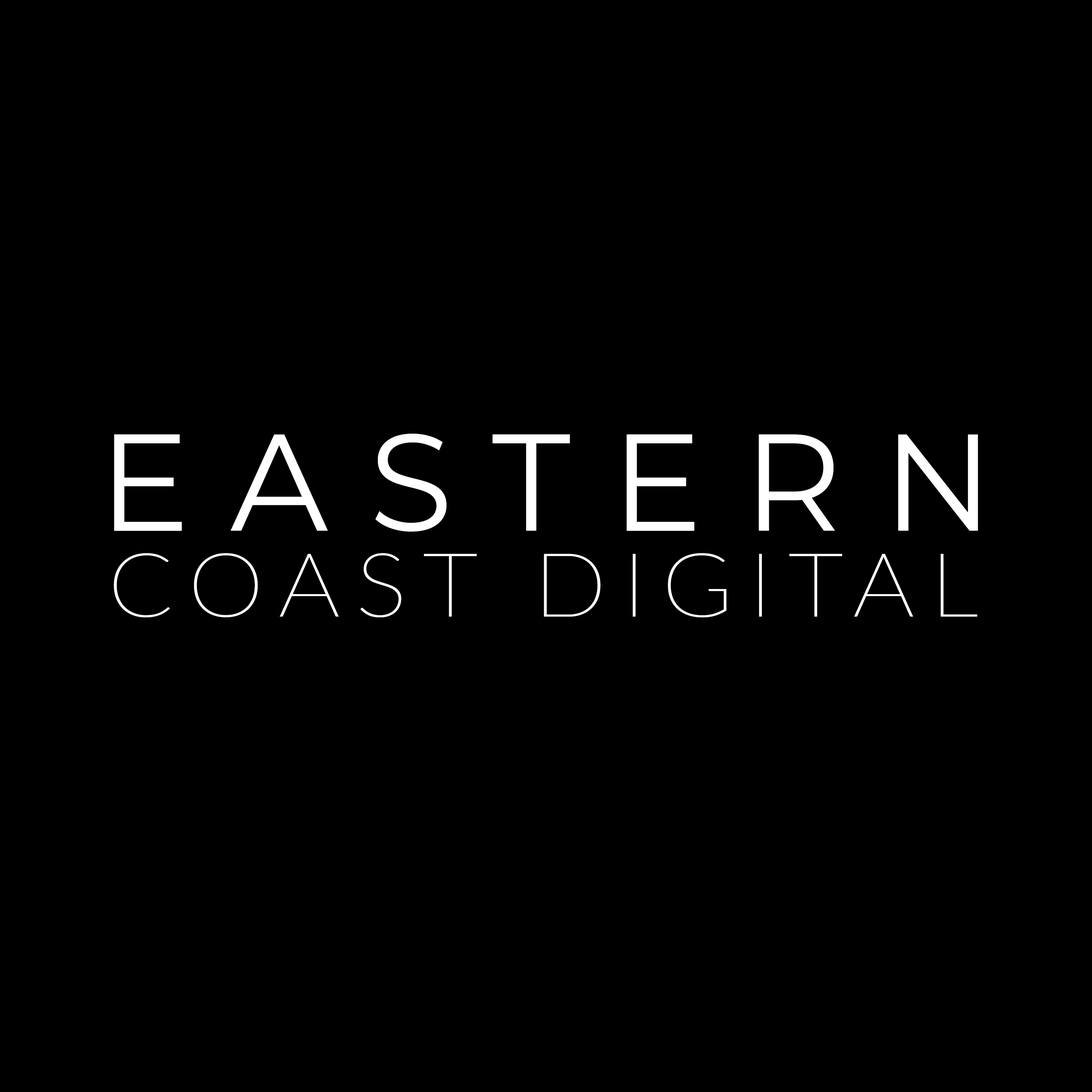
<style>
.page{position:relative;width:1092px;height:1092px;background:#000000}
.page>*{position:absolute;margin:0}
.t1{font:137.4px "Montserrat-Regular";letter-spacing:0.3em;color:#ffffff;text-transform:uppercase}
.t2{font:89.2px "Lato-Thin";letter-spacing:0.16em;color:#ffffff;text-transform:uppercase;scale:1.08 1}
</style>
<div class="page">
<p class="t1" style="left:114px;top:434px;width:864px;height:98px">eastern</p>
<p class="t2" style="left:114px;top:553px;width:863px;height:64px">COAST DIGITAL</p>
</div>
